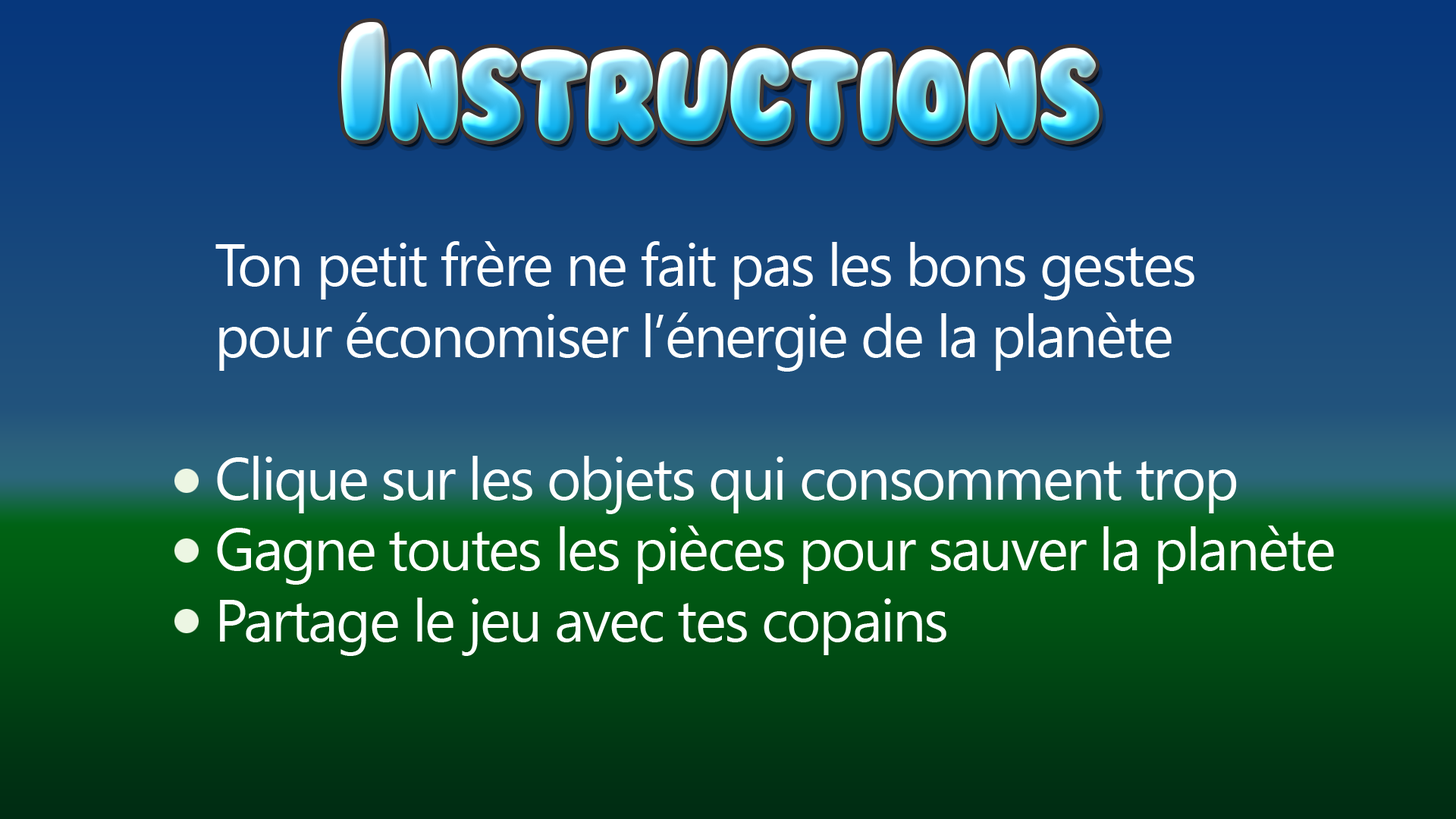
<style>
.page{position:relative;width:1456px;height:819px}
.page>*{position:absolute;margin:0}
.t1{font:118.1px "BubbleGum";letter-spacing:-0.035em}
.t2{font:157.8px "BubbleGum";letter-spacing:-0.035em}
.t3{font:59.3px "SegoeUI";letter-spacing:-0.035em;color:#ffffff}
</style>
<div class="page">
<p class="t1" style="left:340px;top:21px;width:760px;height:121px"><span class="t2">I</span>nstructions</p>
<p class="t3" style="left:215px;top:241px;width:1119px;height:415px">Ton petit frère ne fait pas les bons gestes<br>pour économiser l’énergie de la planète<br><br>Clique sur les objets qui consomment trop <br>Gagne toutes les pièces pour sauver la planète<br>Partage le jeu avec tes copains</p>
</div>
